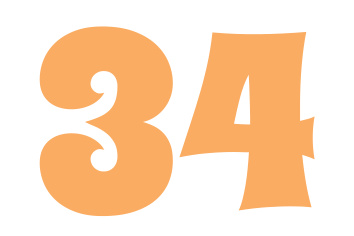
<style>
.page{position:relative;width:354px;height:236px;background:#ffffff}
.page>*{position:absolute;margin:0}
.t1{font:250px "SpicyRice-Regular";color:#faac62}
</style>
<div class="page">
<p class="t1" style="left:39px;top:26px;width:276px;height:191px">34</p>
</div>
